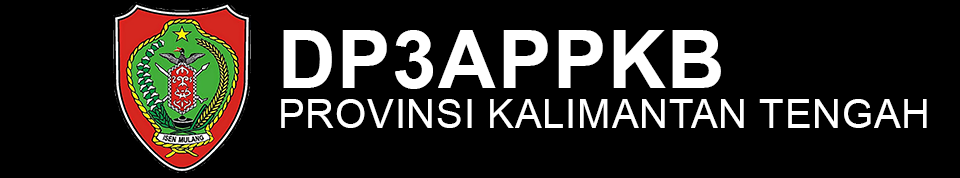
<style>
.page{position:relative;width:960px;height:178px;background:#000000}
.page>*{position:absolute;margin:0}
.t1{font:40px/40px "ArialMT";letter-spacing:0.02em;color:#ffffff}
.t2{font:80px/40px "Arial-BoldMT";letter-spacing:0.02em;color:#ffffff}
</style>
<div class="page">
<p class="t1" style="left:281px;top:30px;width:646px;height:98px"><span class="t2">DP3APPKB<br></span>PROVINSI KALIMANTAN TENGAH</p>
</div>
